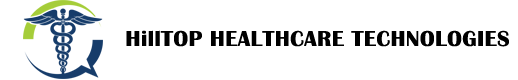
<style>
.page{position:relative;width:518px;height:80px;background:#ffffff}
.page>*{position:absolute;margin:0}
.t1{font:22.2px "BritannicBold";letter-spacing:0.023em;color:#000000}
</style>
<div class="page">
<p class="t1" style="left:126px;top:30px;width:383px;height:17px">HillTOP HEALTHCARE TECHNOLOGIES</p>
</div>
